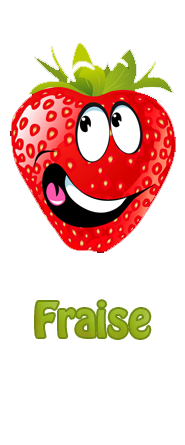
<style>
.page{position:relative;width:185px;height:445px;background:#ffffff}
.page>*{position:absolute;margin:0}
.t1{font:41.8px "HoboStd";color:#95b519}
</style>
<div class="page">
<p class="t1" style="left:36px;top:301px;width:114px;height:37px">Fraise</p>
</div>
